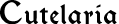
<style>
.page{position:relative;width:119px;height:24px;background:#ffffff}
.page>*{position:absolute;margin:0}
.t1{font:24px "Kelmscott-Regular";letter-spacing:0.05em;color:#000000}
.t2{font:30px "Kelmscott-Regular";letter-spacing:0.05em;color:#000000}
</style>
<div class="page">
<p class="t1" style="left:0px;top:0px;width:117px;height:24px"><span class="t2">C</span>utelaria</p>
</div>
